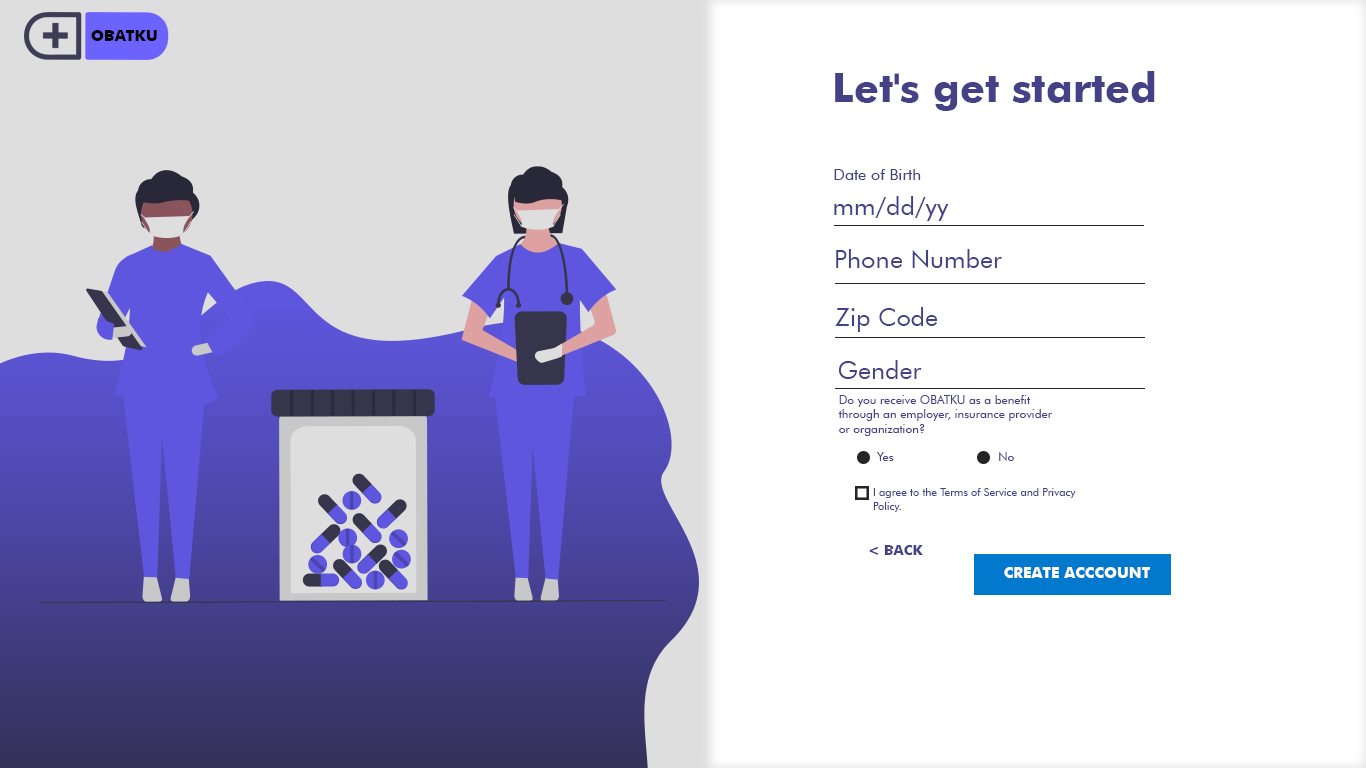
<style>
.page{position:relative;width:1366px;height:768px;background:#ffffff}
.page>*{position:absolute;margin:0}
.t1{font:15.6px "Futura-Bold";color:#000000}
.t2{font:40.7px "Futura-Bold";color:#454187}
.t3{font:16px "FuturaBT-Book";color:#454187}
.t4{font:25.3px "FuturaBT-Book";color:#454187}
.t5{font:12px "FuturaBT-Book";color:#454187}
.t6{font:11px "FuturaBT-Book";color:#454187}
.t7{font:14px "Futura-Bold";color:#454187}
.t8{font:15.2px "Futura-Bold";color:#ffffff}
</style>
<div class="page">
<p class="t1" style="left:91px;top:30px;width:66px;height:11px">OBATKU</p>
<p class="t2" style="left:835px;top:71px;width:320px;height:40px">Let's get started</p>
<p class="t3" style="left:834px;top:169px;width:87px;height:11px">Date of Birth</p>
<p class="t4" style="left:834px;top:196px;width:115px;height:25px">mm/dd/yy</p>
<p class="t4" style="left:836px;top:249px;width:166px;height:19px">Phone Number</p>
<p class="t4" style="left:835px;top:307px;width:103px;height:25px">Zip Code</p>
<p class="t4" style="left:838px;top:360px;width:84px;height:19px">Gender</p>
<p class="t5" style="left:838px;top:395px;width:214px;height:41px">Do you receive OBATKU as a benefit <br>through an employer, insurance provider <br>or organization?</p>
<p class="t5" style="left:876px;top:452px;width:18px;height:9px">Yes</p>
<p class="t5" style="left:999px;top:452px;width:15px;height:9px">No</p>
<p class="t6" style="left:873px;top:488px;width:203px;height:24px">I agree to the Terms of Service and Privacy<br>Policy.</p>
<p class="t7" style="left:869px;top:545px;width:54px;height:10px">&lt; BACK</p>
<p class="t8" style="left:1004px;top:567px;width:146px;height:11px">CREATE ACCCOUNT</p>
</div>
